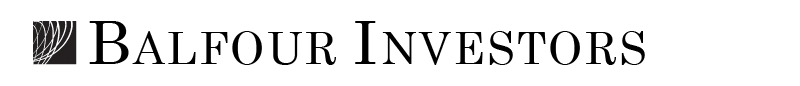
<style>
.page{position:relative;width:800px;height:86px;background:#ffffff}
.page>*{position:absolute;margin:0}
.t1{font:44px "Century";letter-spacing:0.05em;color:#000000}
.t2{font:60px "Century";letter-spacing:0.05em;color:#000000}
</style>
<div class="page">
<p class="t1" style="left:89px;top:21px;width:556px;height:44px"><span class="t2">B</span>ALFOUR <span class="t2">I</span>NVESTORS</p>
</div>
